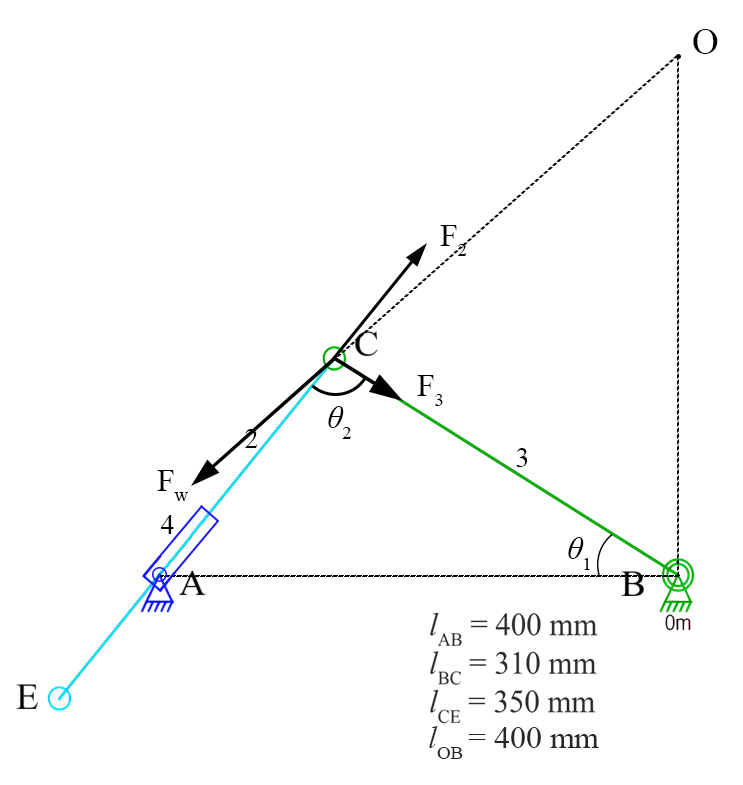
<style>
.page{position:relative;width:743px;height:785px;background:#ffffff}
.page>*{position:absolute;margin:0}
.t1{font:64px "TimesNewRomanPSMT";color:#000000}
.t2{font:32px "TimesNewRomanPSMT";color:#000000}
.t3{font:32px "TimesNewRomanPS-ItalicMT";color:#000000}
.t4{font:48px "TimesNewRomanPSMT";color:#000000}
.t5{font:32px "TimesNewRomanPSMT";color:#272727}
.t6{font:32px "TimesNewRomanPS-ItalicMT";color:#272727}
</style>
<div class="page">
<p class="t1" style="left:693px;top:29px;width:25px;height:25px">O</p>
<p class="t2" style="left:440px;top:225px;width:27px;height:31px">F2</p>
<p class="t2" style="left:417px;top:375px;width:26px;height:31px">F3</p>
<p class="t3" style="left:328px;top:406px;width:23px;height:33px">θ<span class="t2">2</span></p>
<p class="t4" style="left:245px;top:429px;width:13px;height:19px">2</p>
<p class="t4" style="left:516px;top:448px;width:12px;height:19px">3</p>
<p class="t2" style="left:157px;top:470px;width:31px;height:31px">Fw</p>
<p class="t4" style="left:161px;top:515px;width:13px;height:19px">4</p>
<p class="t3" style="left:568px;top:537px;width:22px;height:33px">θ<span class="t2">1</span></p>
<p class="t5" style="left:429px;top:726px;width:170px;height:33px"><span class="t6">l</span>OB = 400 mm</p>
</div>
